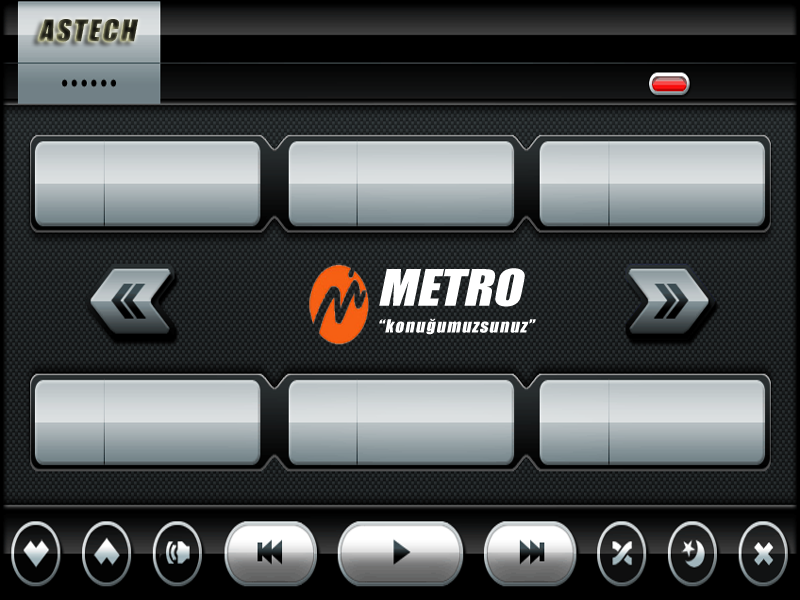
<style>
.page{position:relative;width:800px;height:600px}
.page>*{position:absolute;margin:0}
.t1{font:27.4px "Impact";letter-spacing:0.06em;font-style:italic;scale:1.07 1}
.t2{font:46.5px "Impact";color:#ffffff;font-style:italic;scale:1.16 1}
.t3{font:16.8px "Impact";letter-spacing:0.06em;color:#ffffff;font-style:italic;scale:1.07 1}
</style>
<div class="page">
<p class="t1" style="left:37px;top:19px;width:101px;height:23px">ASTECH</p>
<p class="t2" style="left:379px;top:268px;width:146px;height:39px">METRO</p>
<p class="t3" style="left:379px;top:318px;width:157px;height:17px">“konuğumuzsunuz”</p>
</div>
